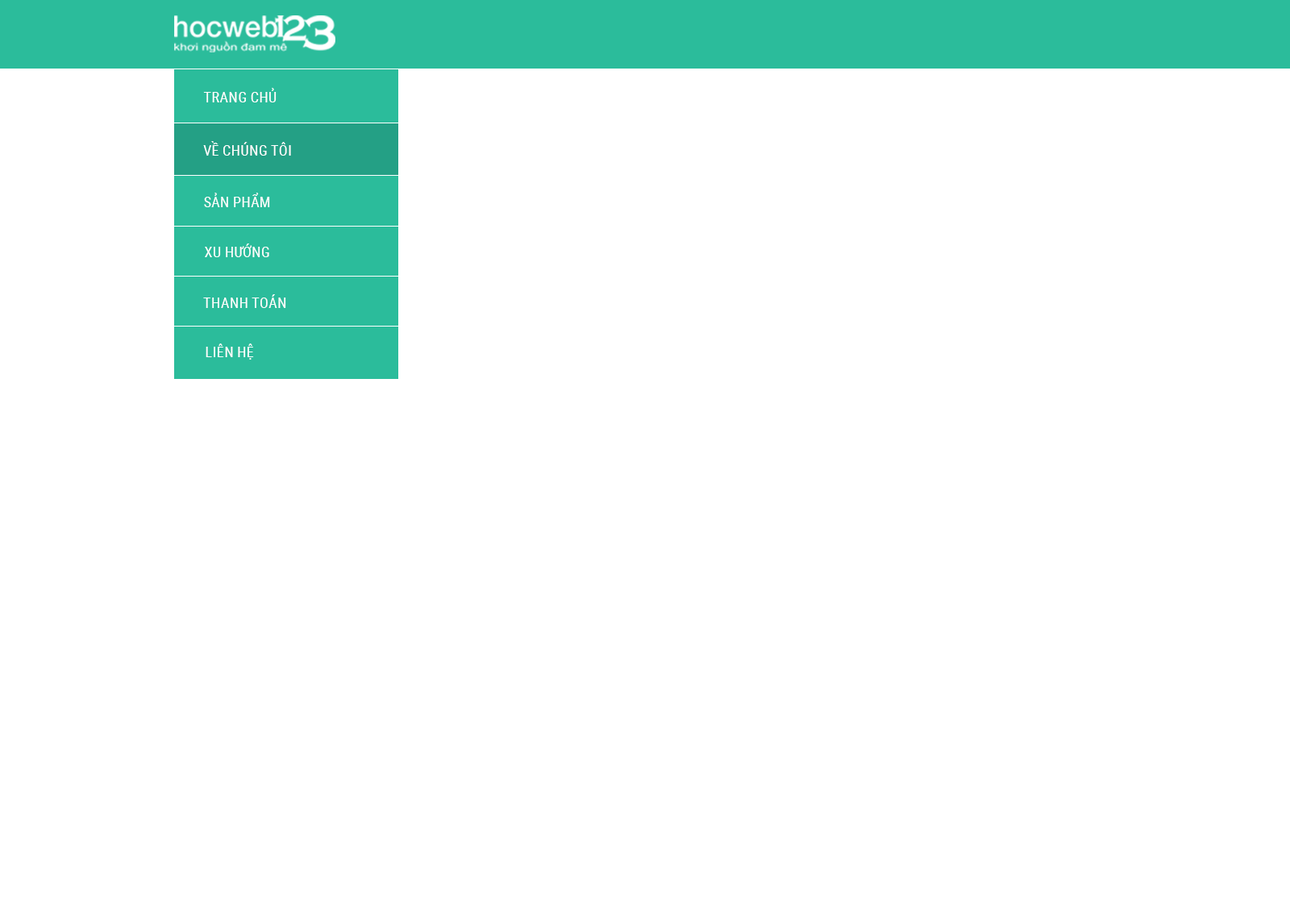
<style>
.page{position:relative;width:1290px;height:924px;background:#ffffff}
.page>*{position:absolute;margin:0}
.t1{font:14.5px "RobotoCondensed-Regular";color:#ffffff;text-transform:uppercase}
</style>
<div class="page">
<p class="t1" style="left:203px;top:88px;width:74px;height:14px">TRANG CHỦ</p>
<p class="t1" style="left:203px;top:141px;width:88px;height:15px">vỀ CHÚNG TÔI</p>
<p class="t1" style="left:204px;top:193px;width:66px;height:14px">SẢN PHẨM</p>
<p class="t1" style="left:205px;top:244px;width:64px;height:13px">XU HƯỚNG</p>
<p class="t1" style="left:203px;top:294px;width:83px;height:14px">THANH TOÁN</p>
<p class="t1" style="left:206px;top:344px;width:48px;height:16px">Liên hệ</p>
</div>
